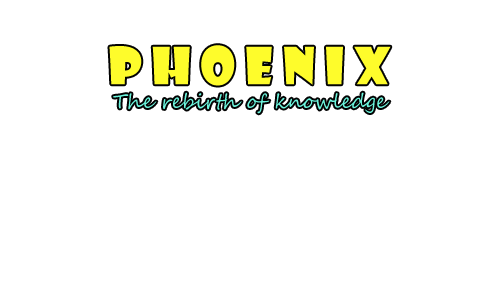
<style>
.page{position:relative;width:500px;height:300px;background:#ffffff}
.page>*{position:absolute;margin:0}
.t1{font:20px "SegoeScript";color:#6cf5dd}
.t2{font:50px/1.9px "ShowcardGothic-Reg";color:#fefc2b}
</style>
<div class="page">
<p class="t1" style="left:109px;top:45px;width:282px;height:69px;text-align:center"><span class="t2">P H O E N I X<br></span>The rebirth of knowledge</p>
</div>
